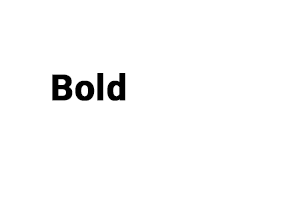
<style>
.page{position:relative;width:300px;height:200px;background:#ffffff}
.page>*{position:absolute;margin:0}
.t1{font:36px "Roboto-Bold";color:#000000;font-weight:bold}
</style>
<div class="page">
<p class="t1" style="left:52px;top:73px;width:74px;height:28px">Bold</p>
</div>
